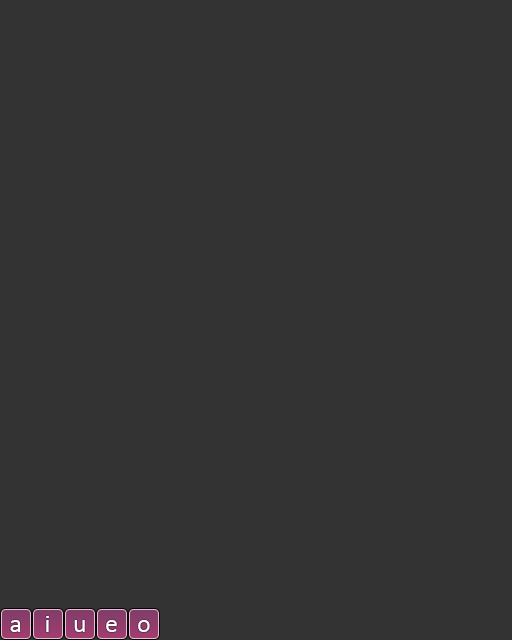
<style>
.page{position:relative;width:512px;height:640px;background:#333333}
.page>*{position:absolute;margin:0}
.t1{font:26px "Calibri";color:#ffffff}
</style>
<div class="page">
<p class="t1" style="left:46px;top:616px;width:3px;height:16px">i</p>
<p class="t1" style="left:10px;top:620px;width:11px;height:12px">a</p>
<p class="t1" style="left:74px;top:620px;width:11px;height:12px">u</p>
<p class="t1" style="left:106px;top:620px;width:11px;height:12px">e</p>
<p class="t1" style="left:138px;top:620px;width:12px;height:12px">o</p>
</div>
